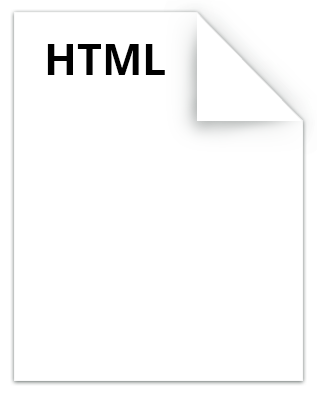
<style>
.page{position:relative;width:317px;height:396px;background:#ffffff}
.page>*{position:absolute;margin:0}
.t1{font:42.6px "OpenSans-Bold";color:#000000;text-transform:uppercase}
</style>
<div class="page">
<p class="t1" style="left:47px;top:44px;width:118px;height:31px">html</p>
</div>
